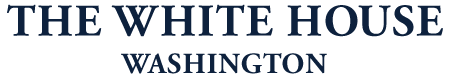
<style>
.page{position:relative;width:450px;height:78px;background:#ffffff}
.page>*{position:absolute;margin:0}
.t1{font:45px "AGaramondPro-Bold";letter-spacing:0.03em;color:#0d213d;text-transform:uppercase}
.t2{font:29px "AGaramondPro-Bold";letter-spacing:0.03em;color:#0d213d;text-transform:uppercase}
</style>
<div class="page">
<p class="t1" style="left:7px;top:4px;width:436px;height:33px">The White House</p>
<p class="t2" style="left:121px;top:53px;width:206px;height:21px">Washington</p>
</div>
